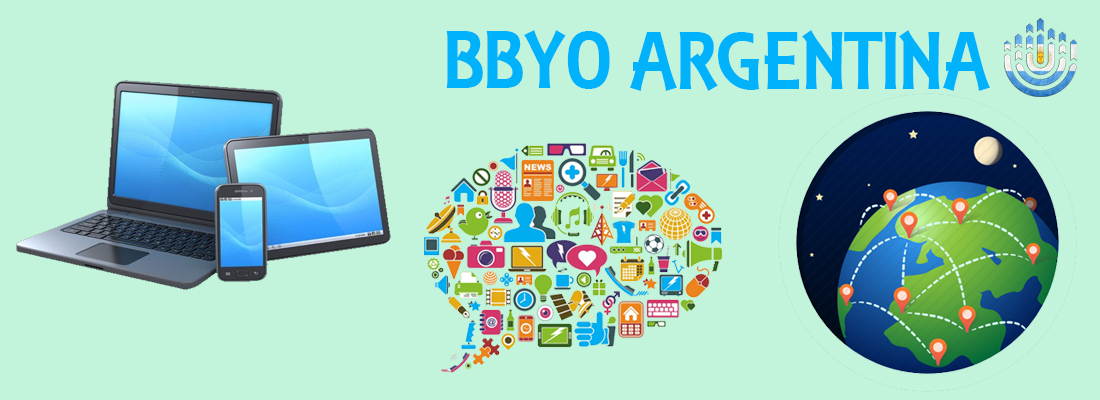
<style>
.page{position:relative;width:1100px;height:400px;background:#c1f4db}
.page>*{position:absolute;margin:0}
.t1{font:86.8px "ARESSENCE";color:#00b1fb}
</style>
<div class="page">
<p class="t1" style="left:446px;top:30px;width:164px;height:59px">BBYO</p>
<p class="t1" style="left:630px;top:30px;width:360px;height:61px">ARGENTINA</p>
</div>
